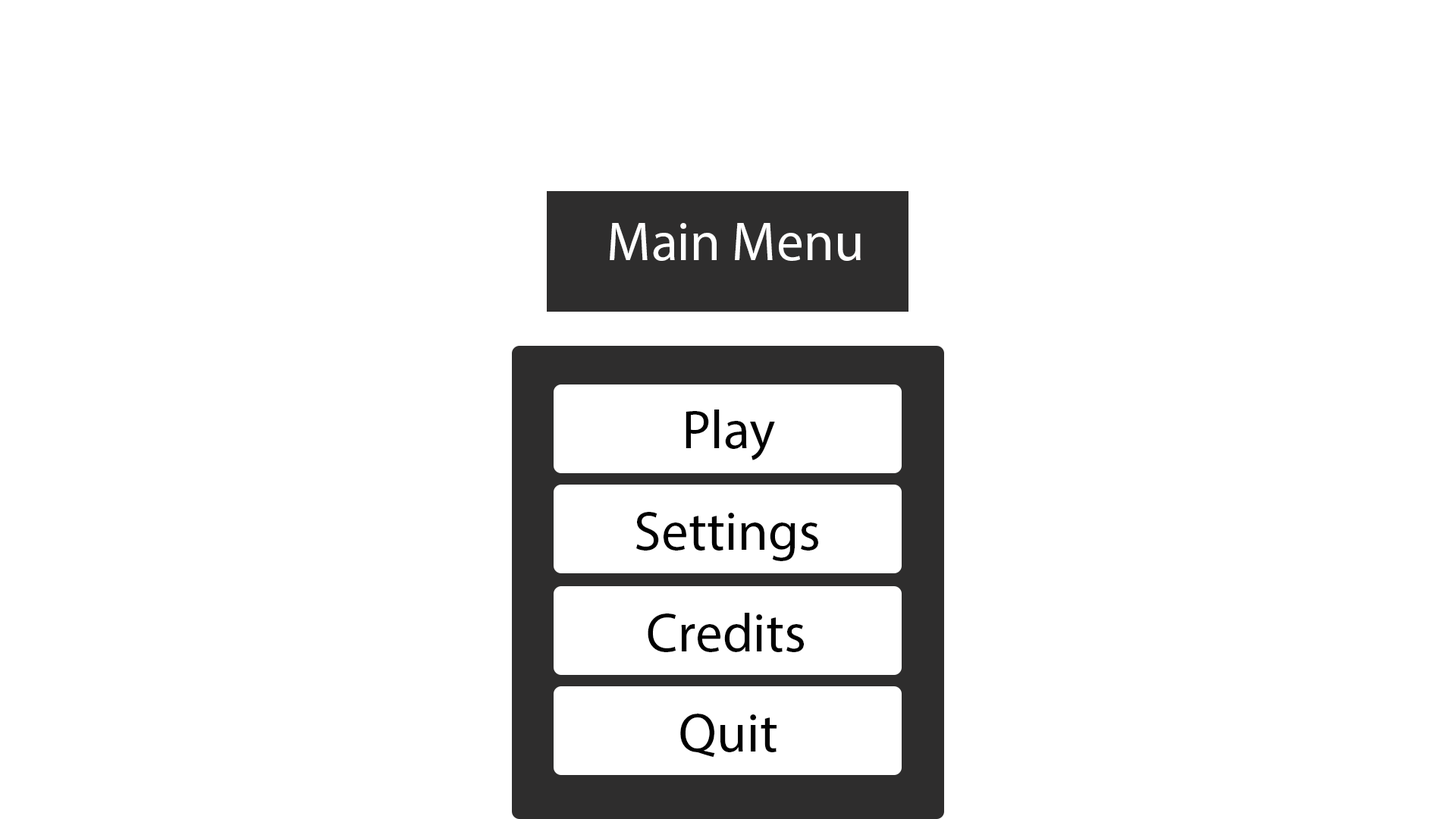
<style>
.page{position:relative;width:1456px;height:819px;background:#ffffff}
.page>*{position:absolute;margin:0}
.t1{font:54.6px "MyriadPro-Regular";color:#ffffff}
.t2{font:54.6px "MyriadPro-Regular";color:#010101}
</style>
<div class="page">
<p class="t1" style="left:610px;top:223px;width:251px;height:38px">Main Menu</p>
<p class="t2" style="left:686px;top:409px;width:89px;height:51px">Play</p>
<p class="t2" style="left:636px;top:512px;width:182px;height:49px">Settings</p>
<p class="t2" style="left:648px;top:613px;width:156px;height:39px">Credits</p>
<p class="t2" style="left:680px;top:714px;width:97px;height:44px">Quit</p>
</div>
